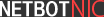
<style>
.page{position:relative;width:104px;height:17px;background:#333333}
.page>*{position:absolute;margin:0}
.t1{font:17.9px "FZZDHJW--GB1-0";color:#ffffff;scale:0.78 1}
</style>
<div class="page">
<p class="t1" style="left:0px;top:1px;width:70px;height:16px">NETBOT</p>
</div>
